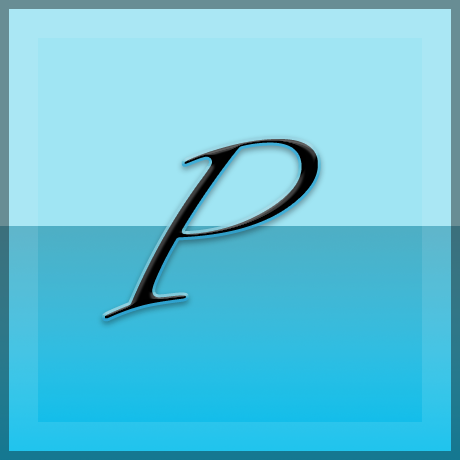
<style>
.page{position:relative;width:460px;height:460px;background:#a0e5f3}
.page>*{position:absolute;margin:0}
.t1{font:300px "InformalRoman-Regular"}
</style>
<div class="page">
<p class="t1" style="left:102px;top:136px;width:219px;height:186px">P</p>
</div>
